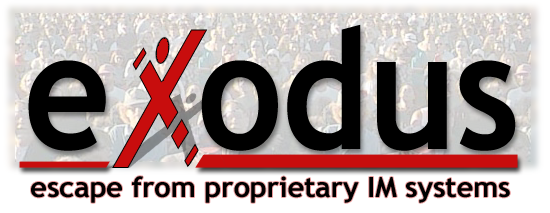
<style>
.page{position:relative;width:550px;height:213px}
.page>*{position:absolute;margin:0}
.t1{font:166.1px "TrebuchetMS-Bold";letter-spacing:-0.01em;color:#000000;scale:0.91 1}
.t2{font:28px "TrebuchetMS-Bold";letter-spacing:-0.01em;color:#000000;scale:1.05 1}
</style>
<div class="page">
<p class="t1" style="left:28px;top:24px;width:488px;height:127px">e  odus</p>
<p class="t2" style="left:31px;top:176px;width:479px;height:27px">escape from proprietary IM systems</p>
</div>
